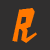
<style>
.page{position:relative;width:50px;height:50px;background:#302f2f}
.page>*{position:absolute;margin:0}
.t1{font:38.7px "SaucyMillionaire";color:#ff7800}
</style>
<div class="page">
<p class="t1" style="left:12px;top:8px;width:25px;height:35px">R</p>
</div>
